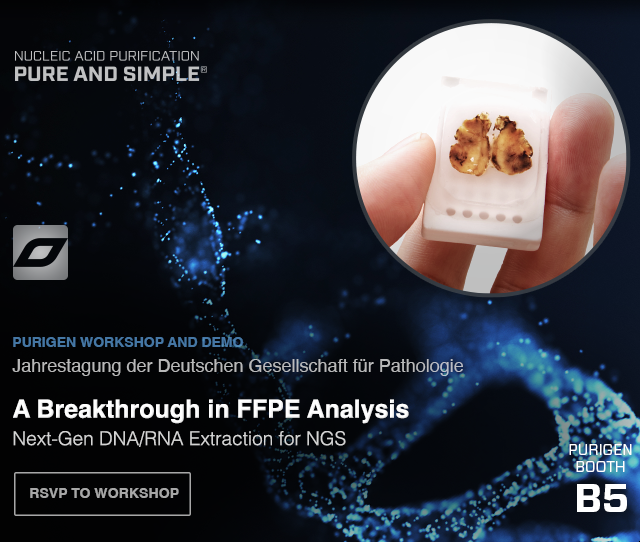
<style>
.page{position:relative;width:640px;height:542px}
.page>*{position:absolute;margin:0}
.t1{font:14px "Helvetica-Bold";color:#4577a5;text-transform:uppercase}
.t2{font:18px "Helvetica";color:#b8b9b9}
.t3{font:19px/27.4px "Helvetica-Light";color:#d6d6d6}
.t4{font:25px/27.4px "Helvetica-Bold";color:#ffffff}
.t5{font:15px/17px "Forza-Book";color:#ffffff;text-transform:uppercase}
.t6{font:40px "Forza-Bold";color:#ffffff;text-transform:uppercase}
.t7{font:14.3px "Helvetica-Bold";letter-spacing:-0.01em;color:#a7a7a7;text-transform:uppercase}
</style>
<div class="page">
<p class="t1" style="left:13px;top:337px;width:230px;height:10px">Purigen Workshop and Demo</p>
<p class="t2" style="left:12px;top:359px;width:451px;height:17px">Jahrestagung der Deutschen Gesellschaft für Pathologie</p>
<p class="t3" style="left:13px;top:399px;width:396px;height:48px"><span class="t4">A Breakthrough in FFPE Analysis<br></span>Next-Gen DNA/RNA Extraction for NGS</p>
<p class="t5" style="left:569px;top:444px;width:63px;height:28px;text-align:center">Purigen<br>Booth</p>
<p class="t6" style="left:577px;top:484px;width:50px;height:28px">B5</p>
<p class="t7" style="left:30px;top:488px;width:149px;height:10px">RSVP to WORKSHOP</p>
</div>
